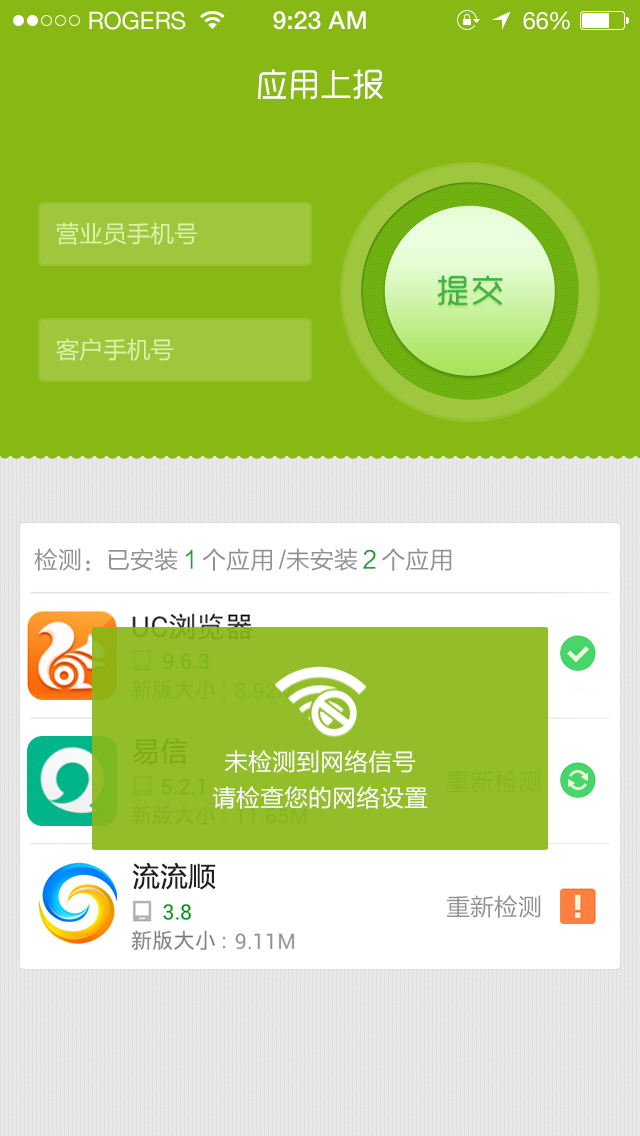
<style>
.page{position:relative;width:640px;height:1136px;background:#88b814}
.page>*{position:absolute;margin:0}
.t1{font:32px "RTWSYueGoTrial-Regular";color:#ffffff}
.t2{font:24px "ZpixEX2";letter-spacing:-0.015em;color:#dcf2a8}
.t3{font:32px "RTWSYueGoTrial-Regular";letter-spacing:0.075em;color:#4eae4c;font-weight:bold}
.t4{font:24px "ZpixEX2";color:#929292}
.t5{font:24px "ZpixEX2";color:#219d35}
.t6{font:28px "ZpixEX2";color:#7faa15}
.t7{font:24px/36px "ZpixEX2";color:#fefefe}
.t8{font:24px "ZpixEX2";color:#89b51f}
.t9{font:28px "ZpixEX2";color:#1f1f1f}
</style>
<div class="page">
<p class="t1" style="left:258px;top:69px;width:125px;height:31px">应用上报</p>
<p class="t2" style="left:56px;top:222px;width:142px;height:23px">营业员手机号</p>
<p class="t3" style="left:437px;top:275px;width:66px;height:31px">提交</p>
<p class="t2" style="left:56px;top:338px;width:118px;height:23px">客户手机号</p>
<p class="t4" style="left:34px;top:548px;width:418px;height:23px">检测：已安装 <span class="t5">1 </span>个应用 /未安装 <span class="t5">2 </span>个应用</p>
<p class="t6" style="left:132px;top:738px;width:56px;height:27px">易信</p>
<p class="t7" style="left:213px;top:750px;width:215px;height:59px;text-align:center">未检测到网络信号<br>请检查您的网络设置</p>
<p class="t8" style="left:446px;top:770px;width:95px;height:23px">重新检测</p>
<p class="t9" style="left:132px;top:862px;width:84px;height:28px">流流顺</p>
<p class="t4" style="left:446px;top:895px;width:95px;height:23px">重新检测</p>
</div>
